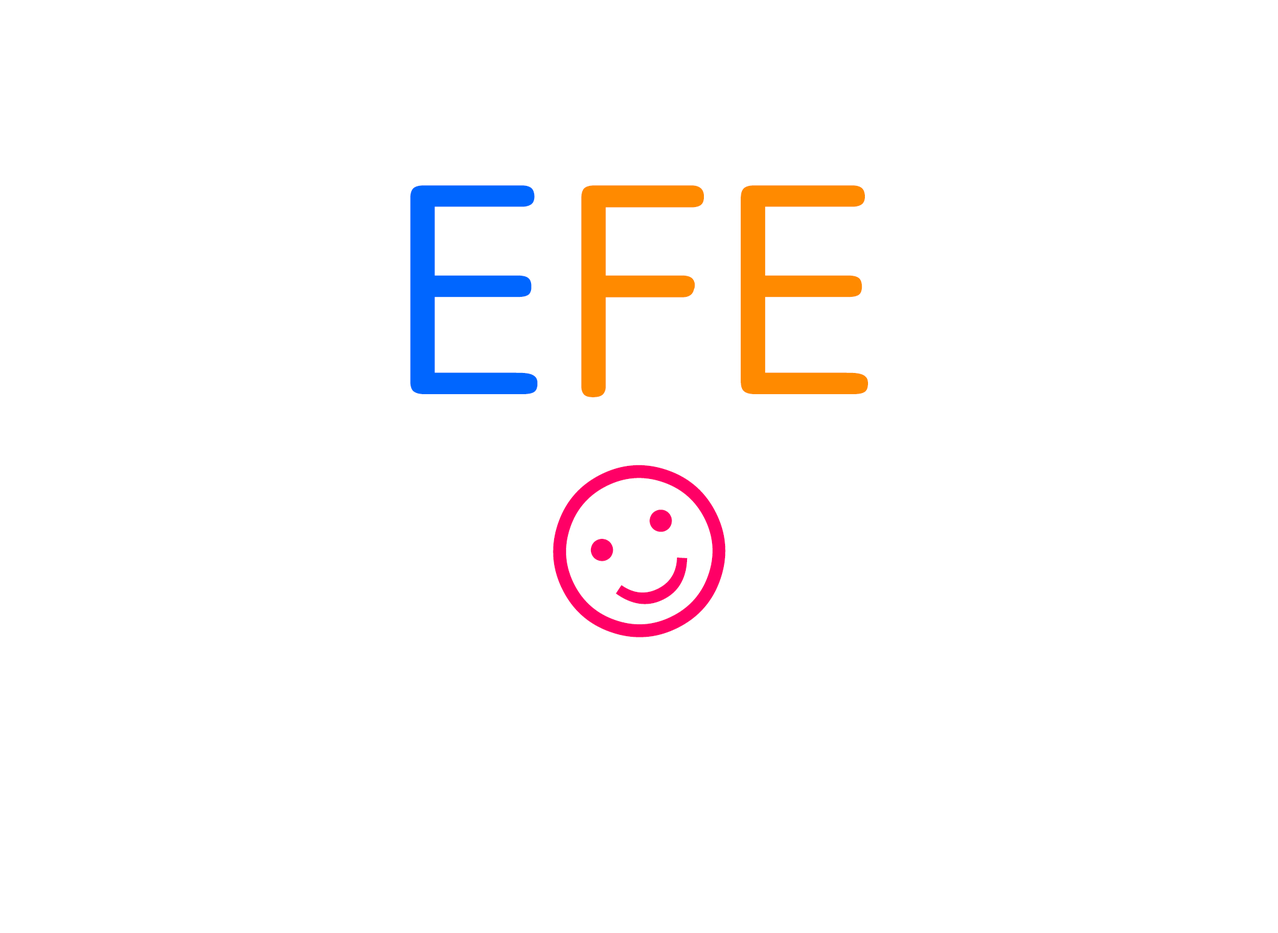
<style>
.page{position:relative;width:1278px;height:933px;background:#ffffff}
.page>*{position:absolute;margin:0}
.t1{font:304.8px "STYuanti-SC-Regular";color:#ff8a00;font-weight:bold}
.t2{font:304.8px "STYuanti-SC-Regular";color:#0066ff;font-weight:bold}
.t3{font:275px "ArialMT";color:#ff0066;font-weight:bold}
</style>
<div class="page">
<p class="t1" style="left:410px;top:185px;width:458px;height:212px"><span class="t2">E</span>FE</p>
<p class="t3" style="left:553px;top:465px;width:173px;height:173px;rotate:-26deg">☺</p>
</div>
